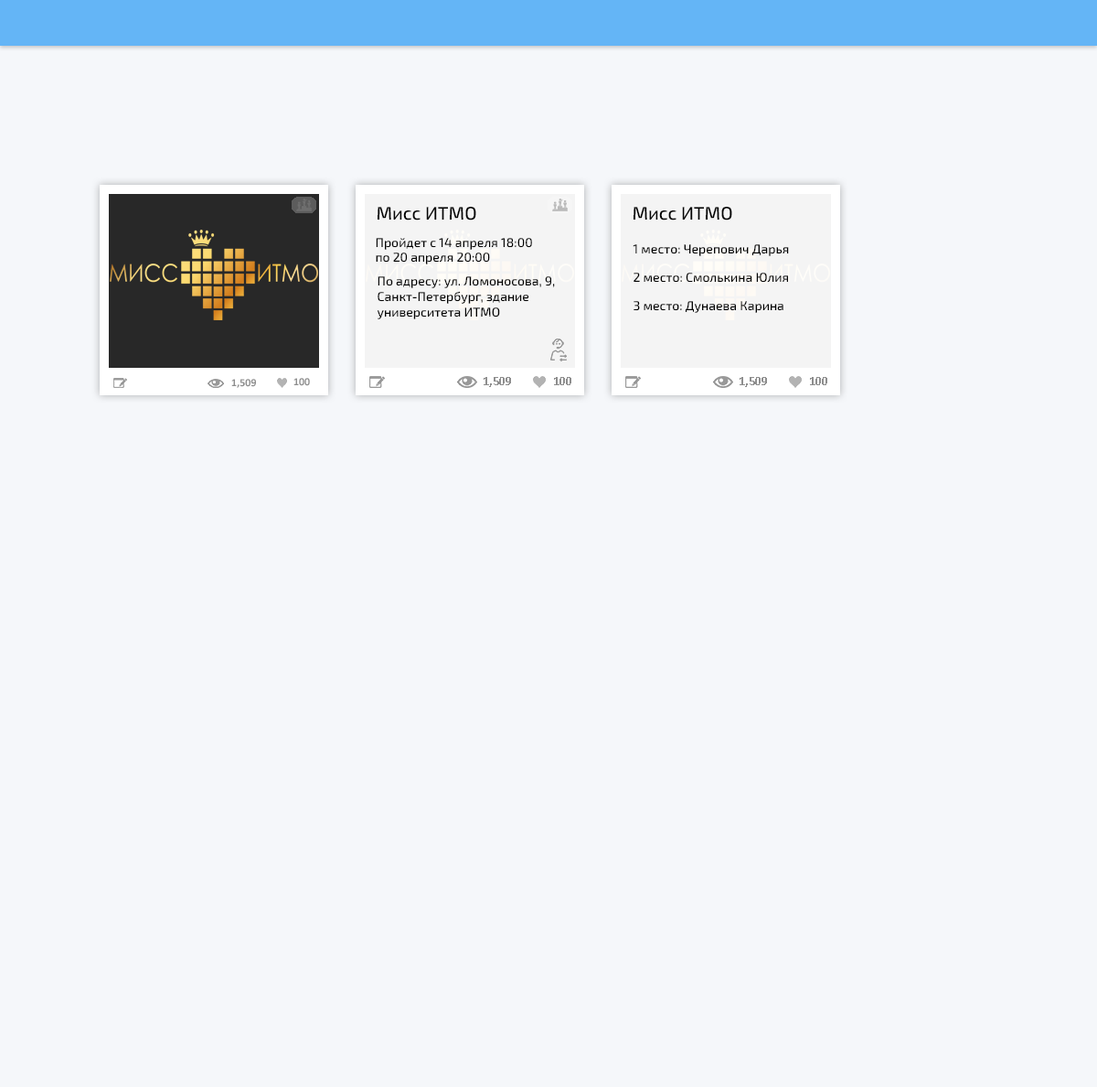
<style>
.page{position:relative;width:1097px;height:1087px;background:#f5f7fa}
.page>*{position:absolute;margin:0}
.t1{font:18.3px "Exo2-Medium";color:#030303}
.t2{font:12.8px "Exo2-Medium";color:#030303}
.t3{font:11px "Calibri-Bold";color:#8e8e8e}
.t4{font:12.8px "Calibri-Bold";color:#8e8e8e}
</style>
<div class="page">
<p class="t1" style="left:378px;top:207px;width:98px;height:13px">Мисс ИТМО</p>
<p class="t1" style="left:634px;top:207px;width:99px;height:13px">Мисс ИТМО</p>
<p class="t2" style="left:376px;top:238px;width:156px;height:26px;text-align:right">Пройдет с 14 апреля 18:00 <br>по 20 апреля 20:00</p>
<p class="t2" style="left:633px;top:244px;width:156px;height:12px">1 место: Черепович Дарья</p>
<p class="t2" style="left:377px;top:276px;width:178px;height:43px;text-align:right">По адресу: ул. Ломоносова, 9, <br>Санкт-Петербург, здание <br>университета ИТМО</p>
<p class="t2" style="left:634px;top:273px;width:154px;height:10px">2 место: Смолькина Юлия</p>
<p class="t2" style="left:634px;top:301px;width:150px;height:12px">3 место: Дунаева Карина</p>
<p class="t3" style="left:294px;top:378px;width:16px;height:8px">100</p>
<p class="t4" style="left:484px;top:377px;width:27px;height:10px">1,509</p>
<p class="t4" style="left:554px;top:377px;width:18px;height:8px">100</p>
<p class="t4" style="left:740px;top:377px;width:27px;height:10px">1,509</p>
<p class="t4" style="left:810px;top:377px;width:18px;height:8px">100</p>
<p class="t3" style="left:231px;top:379px;width:25px;height:9px">1,509</p>
</div>
